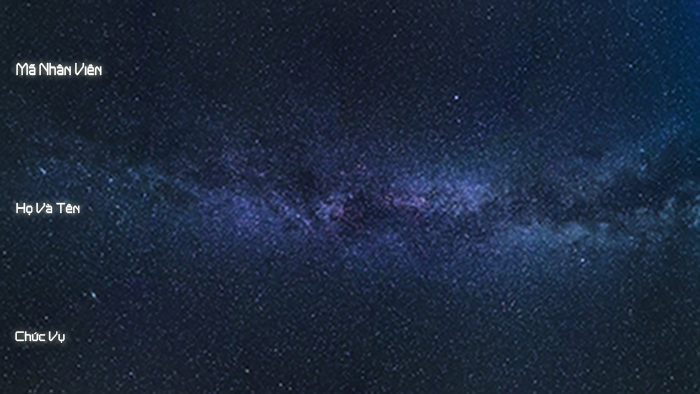
<style>
.page{position:relative;width:700px;height:394px}
.page>*{position:absolute;margin:0}
.t1{font:17px "UTM-NguyenHa-02";color:#ffffff;scale:0.73 1}
.t2{font:14.4px "UTM-NguyenHa-02";color:#ffffff;scale:0.83 1}
.t3{font:13.6px "UTM-NguyenHa-02";color:#ffffff;scale:0.87 1}
</style>
<div class="page">
<p class="t1" style="left:16px;top:62px;width:86px;height:14px">Mã Nhân Viên</p>
<p class="t2" style="left:16px;top:202px;width:64px;height:14px">Họ Và Tên</p>
<p class="t3" style="left:15px;top:331px;width:50px;height:12px">Chức Vụ</p>
</div>
